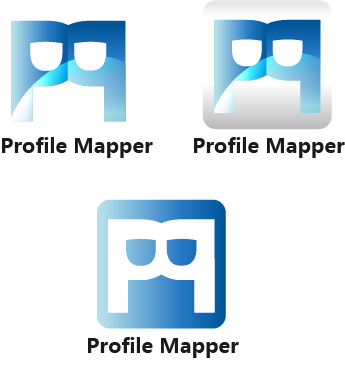
<style>
.page{position:relative;width:345px;height:386px;background:#ffffff}
.page>*{position:absolute;margin:0}
.t1{font:20.2px "MicrosoftYaHei-Bold";color:#1a1a1a}
</style>
<div class="page">
<p class="t1" style="left:2px;top:137px;width:151px;height:21px">Profile Mapper</p>
<p class="t1" style="left:194px;top:137px;width:151px;height:21px">Profile Mapper</p>
<p class="t1" style="left:88px;top:337px;width:151px;height:21px">Profile Mapper</p>
</div>
